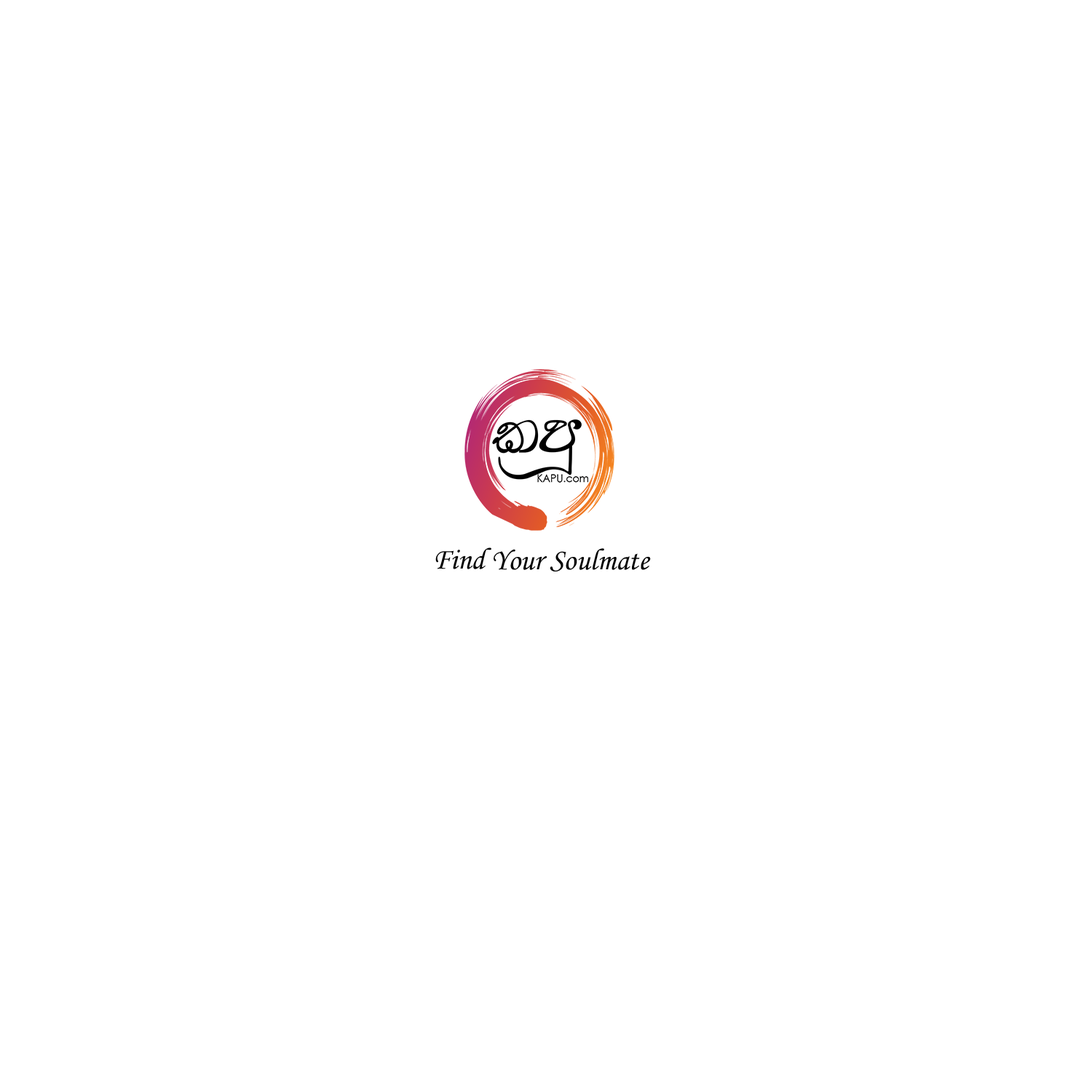
<style>
.page{position:relative;width:1092px;height:1092px;background:#ffffff}
.page>*{position:absolute;margin:0}
.t1{font:30.3px "MonotypeCorsiva";color:#000000}
</style>
<div class="page">
<p class="t1" style="left:435px;top:547px;width:216px;height:24px">Find Your Soulmate</p>
</div>
